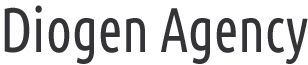
<style>
.page{position:relative;width:308px;height:65px;background:#ffffff}
.page>*{position:absolute;margin:0}
.t1{font:63.4px "UbuntuCondensed-Regular";color:#343438;scale:0.88 1}
</style>
<div class="page">
<p class="t1" style="left:4px;top:5px;width:304px;height:59px">Diogen Agency</p>
</div>
